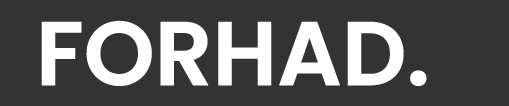
<style>
.page{position:relative;width:509px;height:106px;background:#333333}
.page>*{position:absolute;margin:0}
.t1{font:90px "Poppins-SemiBold";letter-spacing:-0.025em;color:#ffffff;text-transform:uppercase;font-weight:bold}
</style>
<div class="page">
<p class="t1" style="left:41px;top:20px;width:386px;height:66px">FORHAD.</p>
</div>
